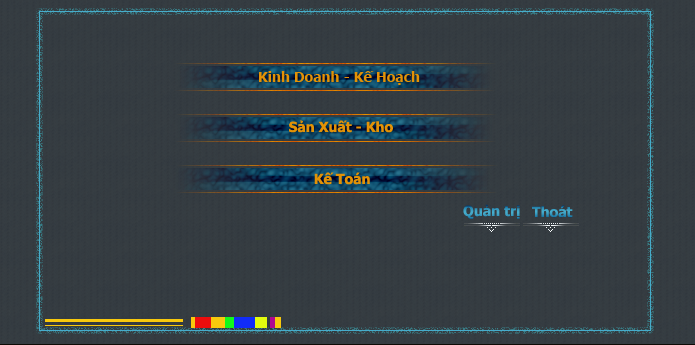
<style>
.page{position:relative;width:695px;height:345px}
.page>*{position:absolute;margin:0}
.t1{font:14px "Tahoma-Bold";color:#e39206}
.t2{font:14px "Tahoma-Bold";color:#3da0c2}
.t3{font:14px "Tahoma-Bold"}
</style>
<div class="page">
<p class="t1" style="left:259px;top:71px;width:161px;height:14px">Kinh Doanh - Kế Hoạch</p>
<p class="t1" style="left:289px;top:120px;width:104px;height:13px">Sản Xuất - Kho</p>
<p class="t1" style="left:314px;top:172px;width:56px;height:13px">Kế Toán</p>
<p class="t2" style="left:463px;top:204px;width:57px;height:15px">Quản trị</p>
<p class="t3" style="left:532px;top:205px;width:41px;height:13px">Thoát</p>
</div>
